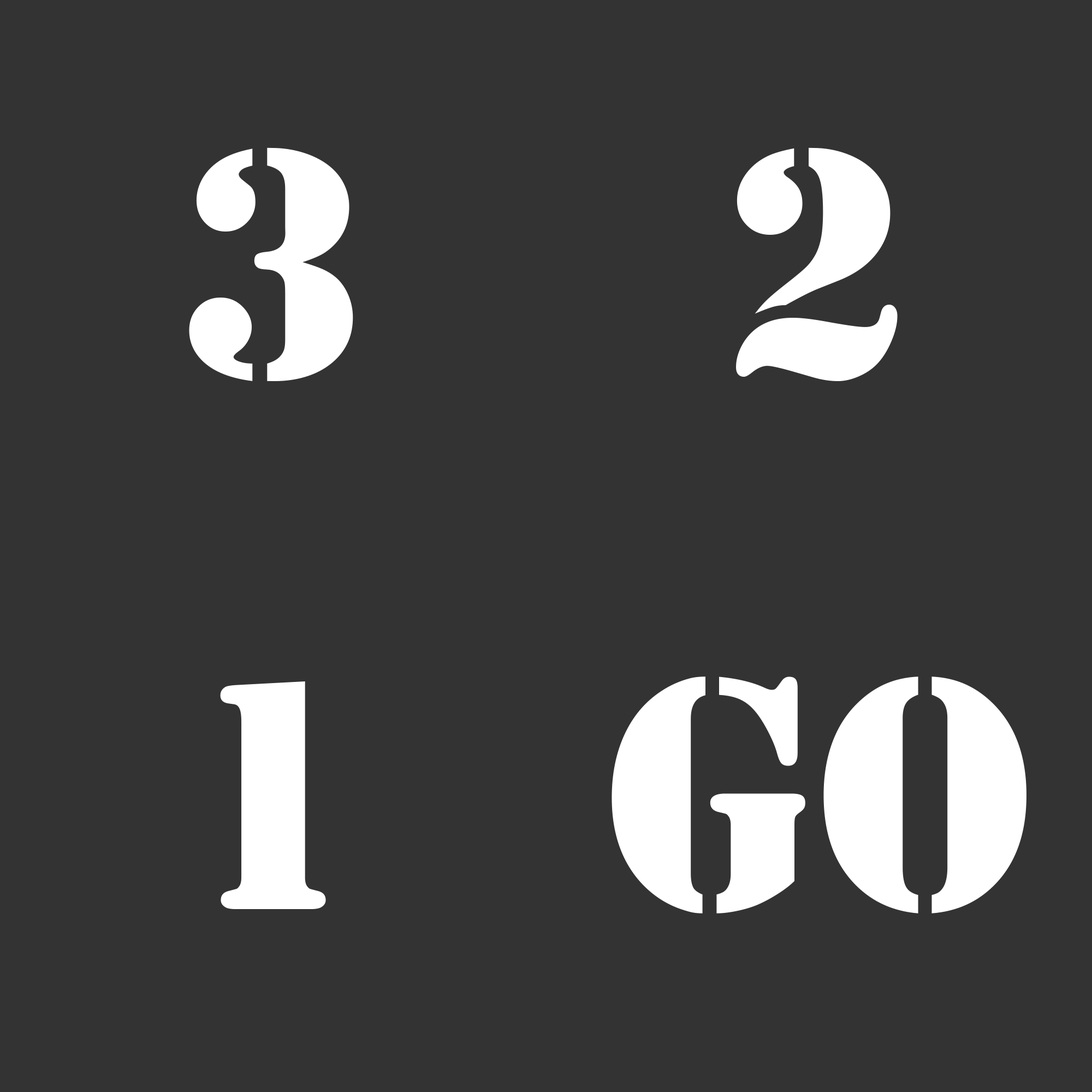
<style>
.page{position:relative;width:1092px;height:1092px;background:#333333}
.page>*{position:absolute;margin:0}
.t1{font:341.2px "Stencil";color:#ffffff}
</style>
<div class="page">
<p class="t1" style="left:189px;top:147px;width:164px;height:234px">3</p>
<p class="t1" style="left:736px;top:147px;width:162px;height:234px">2</p>
<p class="t1" style="left:612px;top:676px;width:414px;height:237px">GO</p>
<p class="t1" style="left:220px;top:681px;width:106px;height:228px">1</p>
</div>
